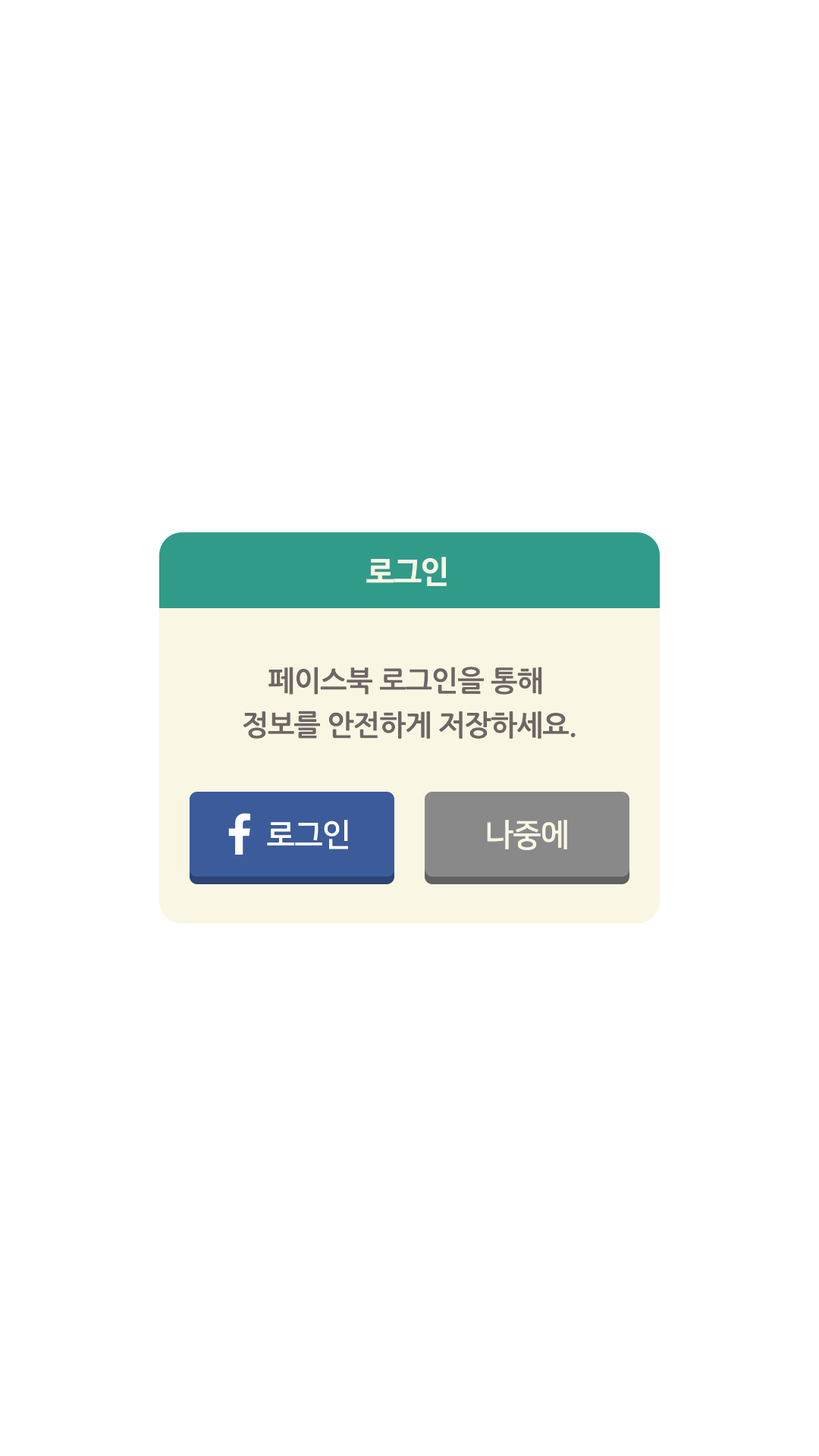
<style>
.page{position:relative;width:819px;height:1456px;background:#ffffff}
.page>*{position:absolute;margin:0}
.t1{font:31.6px "NanumBarunGothicBold";letter-spacing:-0.025em;color:#faf6e4}
.t2{font:28.4px/44.2px "NanumGothicBold";letter-spacing:-0.025em;color:#6e6664}
.t3{font:31.6px "NanumSquareOTFB";letter-spacing:-0.025em;color:#ffffff}
.t4{font:31.6px "NanumSquareOTFB";letter-spacing:-0.025em;color:#faf6e4}
</style>
<div class="page">
<p class="t1" style="left:366px;top:557px;width:81px;height:29px">로그인</p>
<p class="t2" style="left:243px;top:667px;width:333px;height:72px;text-align:center">페이스북 로그인을 통해 <br>정보를 안전하게 저장하세요.</p>
<p class="t3" style="left:267px;top:820px;width:81px;height:29px">로그인</p>
<p class="t4" style="left:487px;top:820px;width:80px;height:30px">나중에</p>
</div>
